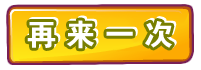
<style>
.page{position:relative;width:201px;height:70px;background:#ffffff}
.page>*{position:absolute;margin:0}
.t1{font:30px "Jdahei";letter-spacing:0.3em;color:#ffffff}
</style>
<div class="page">
<p class="t1" style="left:27px;top:20px;width:145px;height:29px">再来一次</p>
</div>
